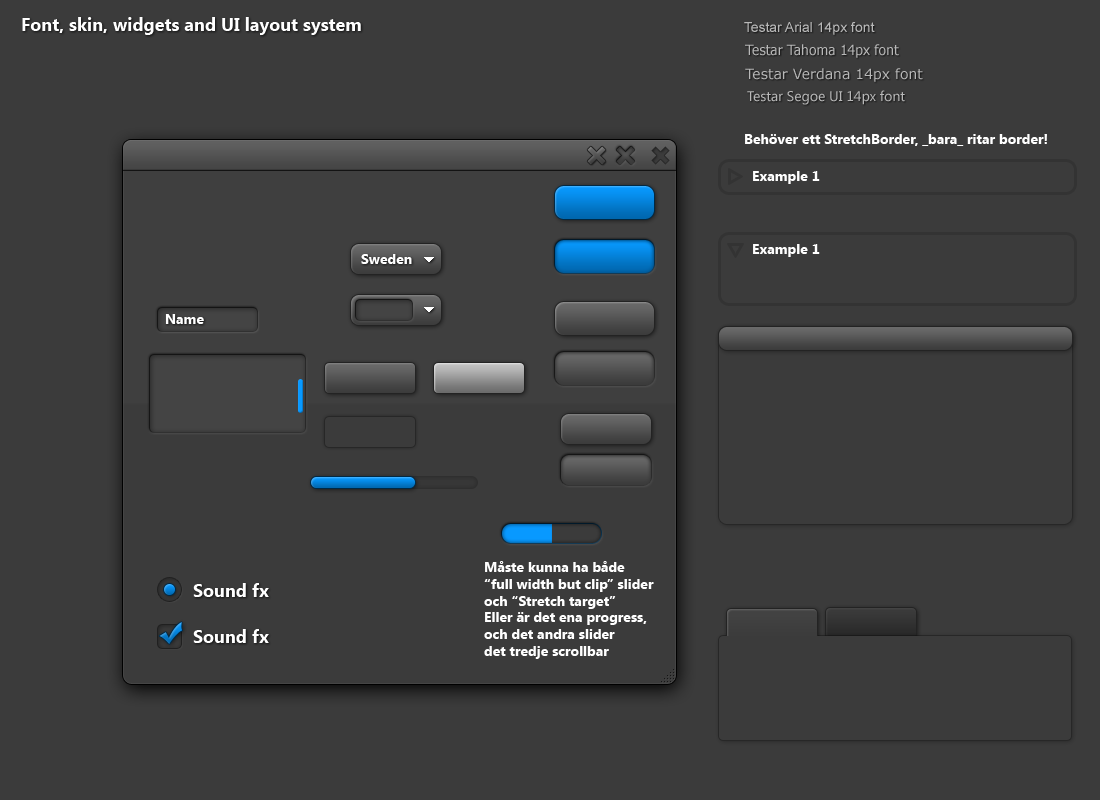
<style>
.page{position:relative;width:1100px;height:800px;background:#3b3b3b}
.page>*{position:absolute;margin:0}
.t1{font:18px "SegoeUI-Bold";color:#ffffff}
.t2{font:14px "ArialMT";color:#b8b8b8}
.t3{font:14px "Tahoma";color:#b8b8b8}
.t4{font:14px "Verdana";color:#b8b8b8}
.t5{font:14px "SegoeUI";color:#b8b8b8}
.t6{font:14px "SegoeUI-Bold";color:#ffffff}
</style>
<div class="page">
<p class="t1" style="left:22px;top:17px;width:339px;height:18px">Font, skin, widgets and UI layout system</p>
<p class="t2" style="left:744px;top:22px;width:131px;height:13px">Testar Arial 14px font</p>
<p class="t3" style="left:745px;top:44px;width:154px;height:14px">Testar Tahoma 14px font</p>
<p class="t4" style="left:745px;top:68px;width:178px;height:14px">Testar Verdana 14px font</p>
<p class="t5" style="left:747px;top:90px;width:158px;height:15px">Testar Segoe UI 14px font</p>
<p class="t6" style="left:745px;top:134px;width:302px;height:12px">Behöver ett StretchBorder, _bara_ ritar border!</p>
<p class="t6" style="left:753px;top:171px;width:67px;height:13px">Example 1</p>
<p class="t6" style="left:753px;top:244px;width:67px;height:13px">Example 1</p>
<p class="t6" style="left:361px;top:254px;width:51px;height:10px">Sweden</p>
<p class="t6" style="left:165px;top:314px;width:39px;height:10px">Name</p>
<p class="t6" style="left:484px;top:561px;width:170px;height:98px">Måste kunna ha både<br>“full width but clip” slider<br>och “Stretch target”<br>Eller är det ena progress,<br>och det andra slider<br>det tredje scrollbar</p>
<p class="t1" style="left:193px;top:583px;width:76px;height:14px">Sound fx</p>
<p class="t1" style="left:193px;top:629px;width:76px;height:14px">Sound fx</p>
</div>
